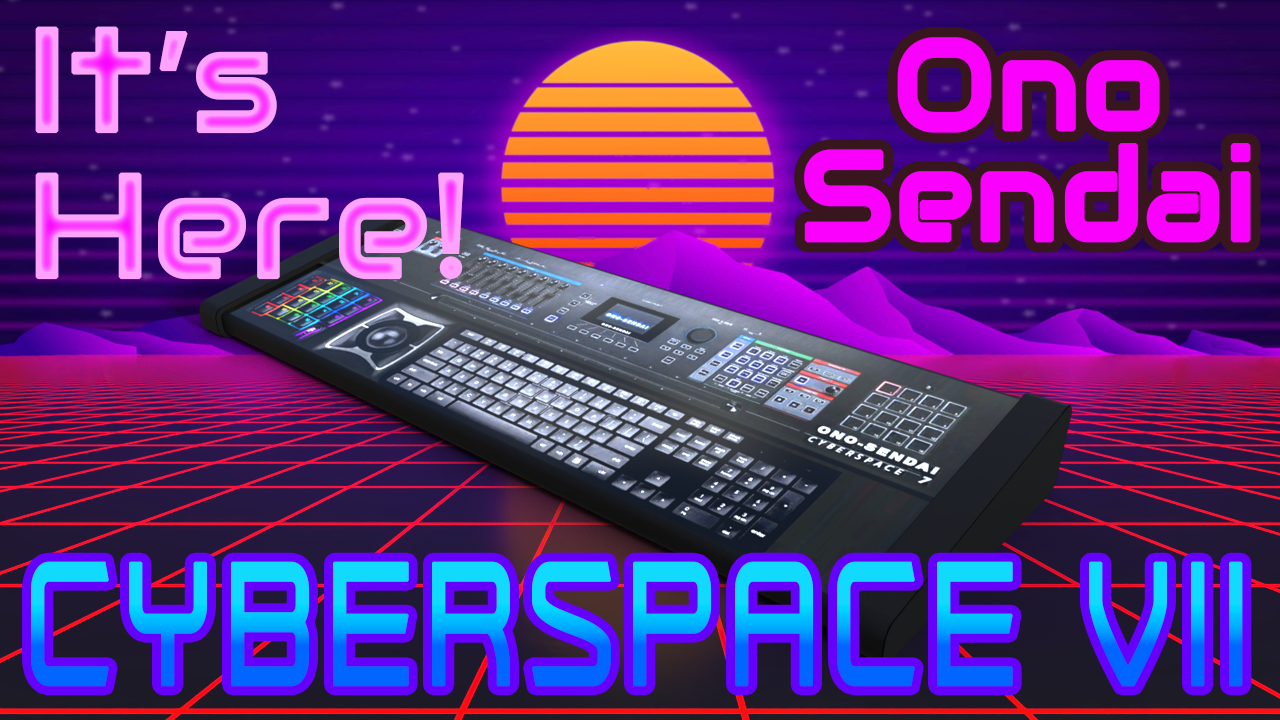
<style>
.page{position:relative;width:1280px;height:720px}
.page>*{position:absolute;margin:0}
.t1{font:146.2px/146.2px "Audiowide-Regular";font-weight:bold}
.t2{font:125.5px/110.8px "Audiowide-Regular";color:#fa01fd;font-weight:bold;scale:0.94 1}
.t3{font:174.7px "TenbyEight";letter-spacing:0.13em;font-weight:bold;scale:0.62 1}
</style>
<div class="page">
<p class="t1" style="left:35px;top:26px;width:429px;height:254px">It’s Here!</p>
<p class="t2" style="left:804px;top:37px;width:447px;height:206px;text-align:center">Ono<br>Sendai</p>
<p class="t3" style="left:31px;top:561px;width:1212px;height:126px">CYBERSPACE VII</p>
</div>
